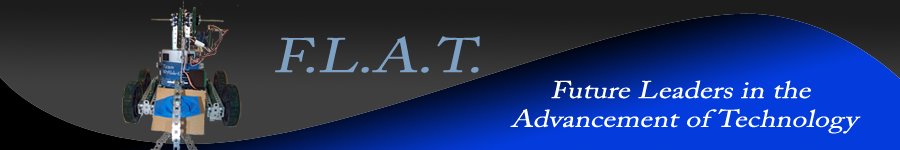
<style>
.page{position:relative;width:900px;height:150px}
.page>*{position:absolute;margin:0}
.t1{font:48px "ACaslonPro-Regular";color:#7ea0c3;font-style:italic;scale:1.25 1}
.t2{font:24px "ACaslonPro-Regular";color:#ffffff;font-style:italic;scale:1.25 1}
</style>
<div class="page">
<p class="t1" style="left:275px;top:36px;width:205px;height:37px">F.L.A.T.</p>
<p class="t2" style="left:510px;top:80px;width:351px;height:54px;text-align:center">Future Leaders in the <br>Advancement of Technology</p>
</div>
